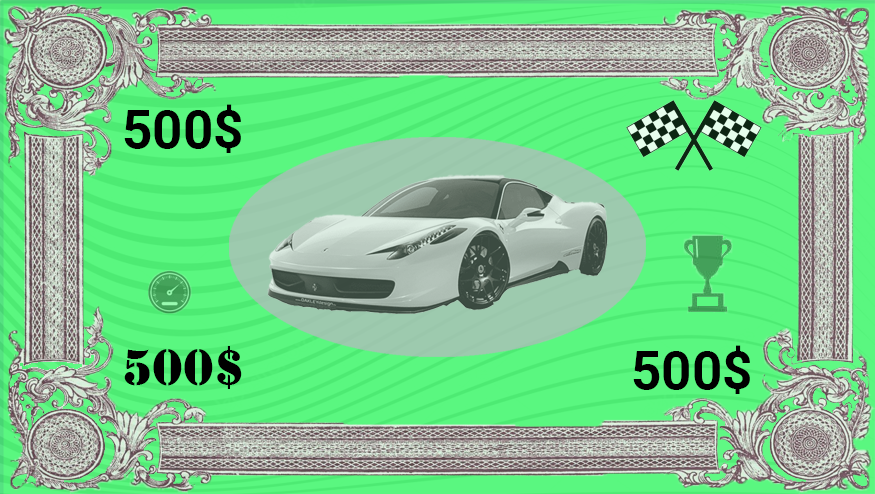
<style>
.page{position:relative;width:875px;height:494px;background:#5af780}
.page>*{position:absolute;margin:0}
.t1{font:53.3px "Roboto-Bold";color:#000000}
.t2{font:53.3px "Stencil";color:#000000}
</style>
<div class="page">
<p class="t1" style="left:124px;top:104px;width:117px;height:49px">500$</p>
<p class="t2" style="left:124px;top:346px;width:118px;height:43px">500$</p>
<p class="t1" style="left:633px;top:345px;width:117px;height:49px">500$</p>
</div>
